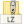
<style>
.page{position:relative;width:24px;height:24px;background:#ffffff}
.page>*{position:absolute;margin:0}
.t1{font:7px "SegoeUI";color:#5c5b59}
</style>
<div class="page">
<p class="t1" style="left:7px;top:16px;width:8px;height:7px">LZ</p>
</div>
